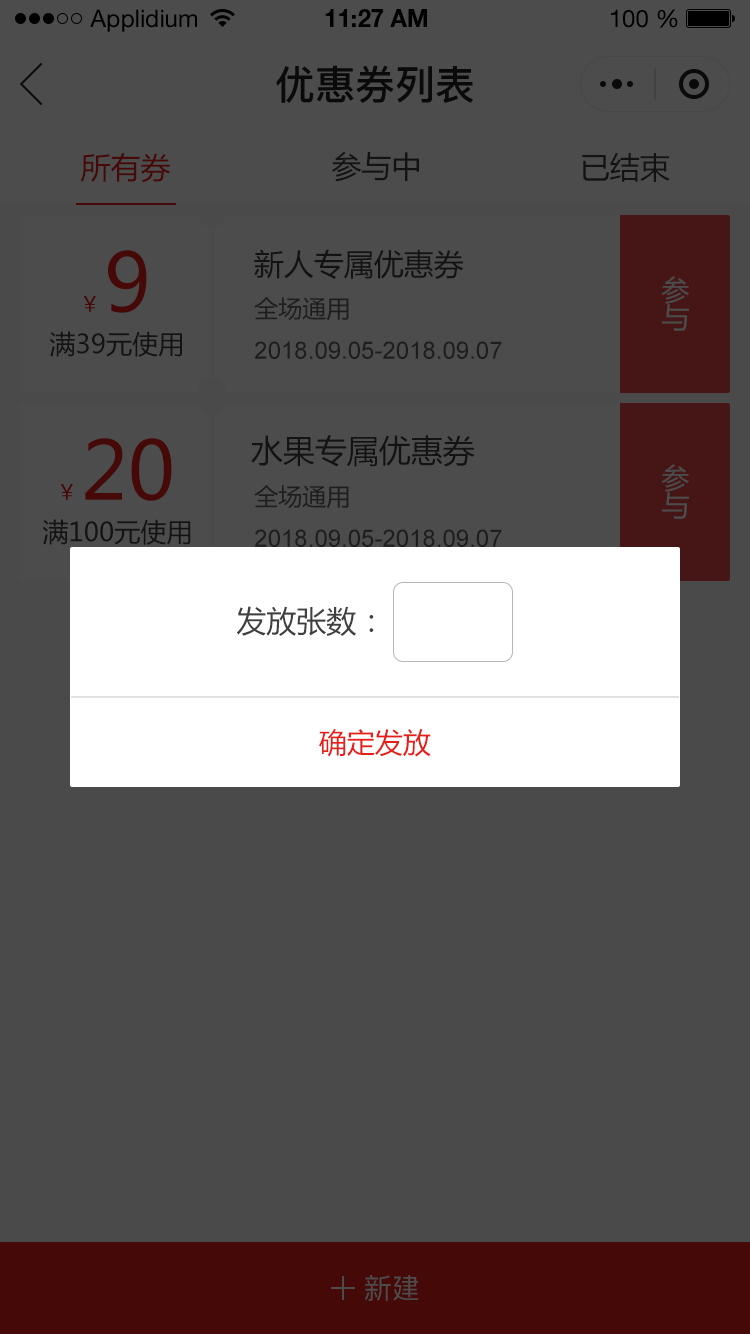
<style>
.page{position:relative;width:750px;height:1334px;background:#4a4a4a}
.page>*{position:absolute;margin:0}
.t1{font:24px "HelveticaNeueLTStd-Roman";color:#000000}
.t2{font:24px "HelveticaNeueLTStd-Bd";color:#000000}
.t3{font:40px "PingFang-SC-Bold";color:#202020;text-transform:uppercase}
.t4{font:30px "MicrosoftYaHei";color:#450907;text-transform:uppercase}
.t5{font:30px "MicrosoftYaHei";color:#131313;text-transform:uppercase}
.t6{font:80px "MicrosoftYaHei";color:#450907;text-transform:uppercase}
.t7{font:28px "MicrosoftYaHei";color:#4c4c4c;text-transform:uppercase}
.t8{font:22px "PingFang-SC-Medium";color:#450907;text-transform:uppercase}
.t9{font:24px "MicrosoftYaHei";color:#1e1e1e;text-transform:uppercase}
.t10{font:26px "MicrosoftYaHei";color:#131313;text-transform:uppercase}
.t11{font:24px "ArialMT";color:#1e1e1e;text-transform:uppercase}
.t12{font:32px "MicrosoftYaHei";color:#131313;text-transform:uppercase}
.t13{font:30px "MicrosoftYaHei";color:#404040;text-transform:uppercase}
.t14{font:28px "MicrosoftYaHei";color:#e61f18;text-transform:uppercase}
.t15{font:28px "PingFang-SC-Medium";color:#4c4c4c;text-transform:uppercase}
</style>
<div class="page">
<p class="t1" style="left:90px;top:9px;width:107px;height:23px">Applidium</p>
<p class="t2" style="left:325px;top:9px;width:102px;height:18px">11:27 AM</p>
<p class="t1" style="left:611px;top:9px;width:67px;height:19px">100 %</p>
<p class="t3" style="left:276px;top:65px;width:197px;height:38px">优惠券列表</p>
<p class="t4" style="left:80px;top:153px;width:90px;height:30px">所有券</p>
<p class="t5" style="left:331px;top:151px;width:88px;height:31px">参与中</p>
<p class="t5" style="left:582px;top:152px;width:88px;height:30px">已结束</p>
<p class="t6" style="left:108px;top:250px;width:39px;height:63px">9</p>
<p class="t5" style="left:254px;top:249px;width:210px;height:30px">新人专属优惠券</p>
<p class="t7" style="left:661px;top:276px;width:28px;height:55px">参与</p>
<p class="t8" style="left:83px;top:296px;width:13px;height:16px">¥</p>
<p class="t9" style="left:254px;top:297px;width:95px;height:24px">全场通用</p>
<p class="t10" style="left:49px;top:331px;width:133px;height:26px">满39元使用</p>
<p class="t11" style="left:255px;top:341px;width:247px;height:18px">2018.09.05-2018.09.07</p>
<p class="t6" style="left:85px;top:438px;width:87px;height:63px">20</p>
<p class="t12" style="left:251px;top:435px;width:224px;height:32px">水果专属优惠券</p>
<p class="t7" style="left:661px;top:464px;width:28px;height:55px">参与</p>
<p class="t8" style="left:60px;top:484px;width:13px;height:16px">¥</p>
<p class="t9" style="left:254px;top:485px;width:95px;height:24px">全场通用</p>
<p class="t10" style="left:42px;top:519px;width:149px;height:26px">满100元使用</p>
<p class="t11" style="left:255px;top:529px;width:247px;height:18px">2018.09.05-2018.09.07</p>
<p class="t13" style="left:236px;top:606px;width:138px;height:30px">发放张数：</p>
<p class="t14" style="left:319px;top:729px;width:112px;height:28px">确定发放</p>
<p class="t15" style="left:364px;top:1274px;width:55px;height:27px">新建</p>
</div>
